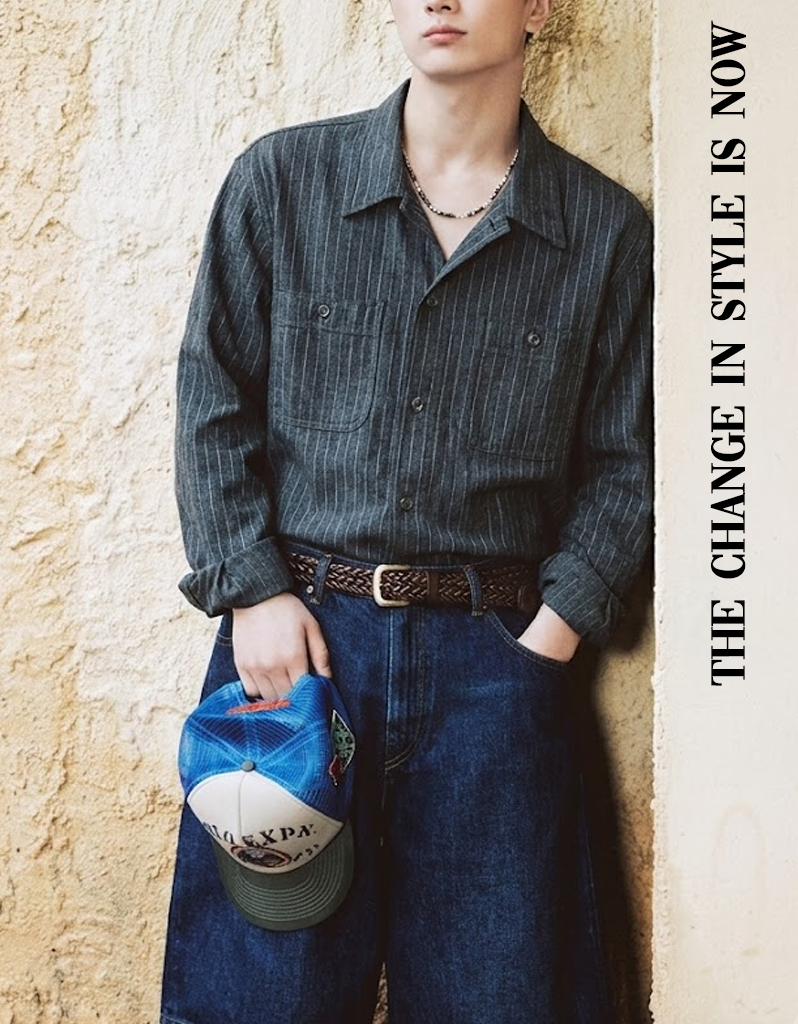
<style>
.page{position:relative;width:798px;height:1024px}
.page>*{position:absolute;margin:0}
.t1{font:49px "Vogue-Regular";letter-spacing:-0.025em;color:#000000;font-weight:bold}
</style>
<div class="page">
<p class="t1" style="left:710px;top:20px;width:36px;height:666px;rotate:180deg">The change in style is now</p>
</div>
